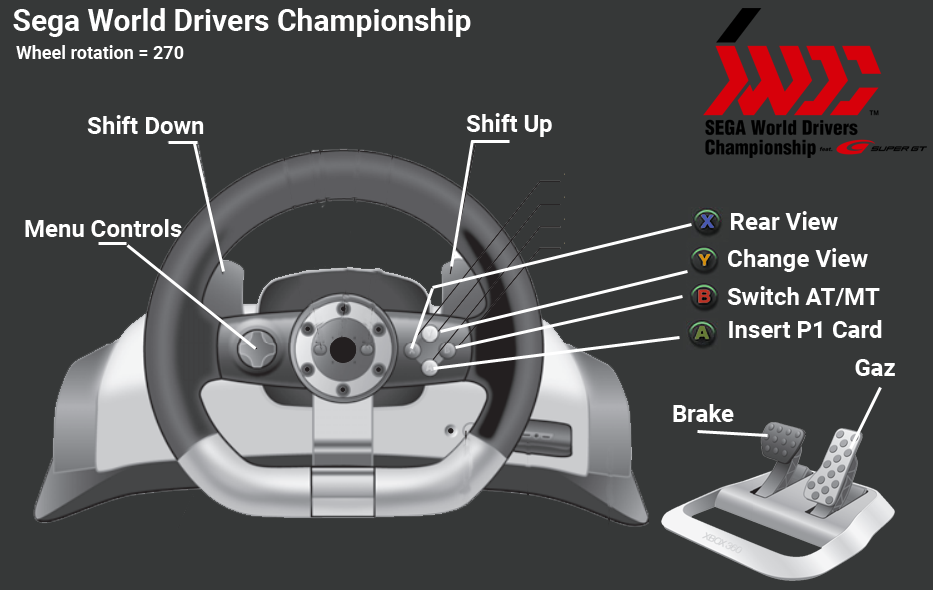
<style>
.page{position:relative;width:933px;height:590px;background:#363838}
.page>*{position:absolute;margin:0}
.t1{font:30px "Roboto-Bold";color:#ffffff}
.t2{font:18px "Roboto-Bold";color:#ffffff}
.t3{font:24px "Roboto-Bold";color:#ffffff}
</style>
<div class="page">
<p class="t1" style="left:13px;top:8px;width:458px;height:29px">Sega World Drivers Championship</p>
<p class="t2" style="left:16px;top:45px;width:168px;height:14px">Wheel rotation = 270</p>
<p class="t3" style="left:466px;top:113px;width:86px;height:24px">Shift Up</p>
<p class="t3" style="left:87px;top:115px;width:117px;height:19px">Shift Down</p>
<p class="t3" style="left:25px;top:219px;width:157px;height:18px">Menu Controls</p>
<p class="t3" style="left:731px;top:211px;width:107px;height:19px">Rear View</p>
<p class="t3" style="left:728px;top:248px;width:140px;height:24px">Change View</p>
<p class="t3" style="left:727px;top:286px;width:153px;height:20px">Switch AT/MT</p>
<p class="t3" style="left:729px;top:320px;width:153px;height:18px">Insert P1 Card</p>
<p class="t3" style="left:855px;top:359px;width:40px;height:17px">Gaz</p>
<p class="t3" style="left:673px;top:404px;width:61px;height:18px">Brake</p>
</div>
